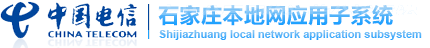
<style>
.page{position:relative;width:430px;height:48px;background:#ffffff}
.page>*{position:absolute;margin:0}
.t1{font:22px "FZLTCHJW--GB1-0"}
.t2{font:11px "Arial-BoldMT"}
</style>
<div class="page">
<p class="t1" style="left:158px;top:5px;width:235px;height:21px">石家庄本地网应用子系统</p>
<p class="t2" style="left:159px;top:30px;width:263px;height:10px">Shijiazhuang local network application subsystem</p>
</div>
